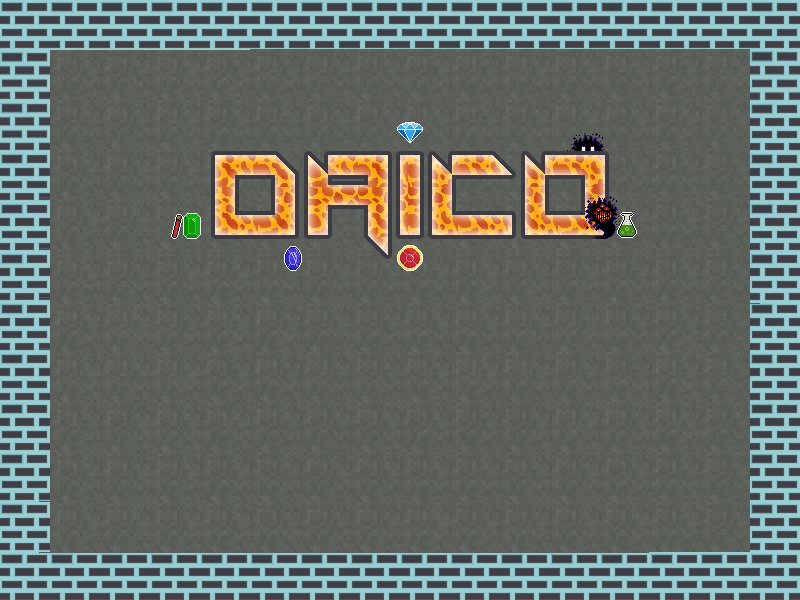
<style>
.page{position:relative;width:800px;height:600px}
.page>*{position:absolute;margin:0}
.t1{font:100px "MotorBlock";letter-spacing:0.025em}
</style>
<div class="page">
<p class="t1" style="left:215px;top:155px;width:390px;height:100px">DAICO</p>
</div>
